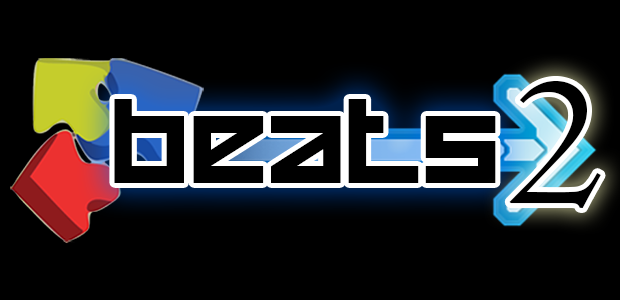
<style>
.page{position:relative;width:620px;height:300px;background:#000000}
.page>*{position:absolute;margin:0}
.t1{font:194.4px "Centaur";color:#000000}
.t2{font:83.8px "HappyKiller";color:#000000;scale:1.04 1}
</style>
<div class="page">
<p class="t1" style="left:509px;top:81px;width:92px;height:127px">2</p>
<p class="t2" style="left:114px;top:99px;width:382px;height:84px">beats</p>
</div>
